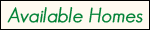
<style>
.page{position:relative;width:150px;height:30px;background:#fffaf0}
.page>*{position:absolute;margin:0}
.t1{font:20px "GeosansLight-Oblique";color:#008135;font-weight:bold}
</style>
<div class="page">
<p class="t1" style="left:7px;top:7px;width:136px;height:16px">Available Homes</p>
</div>
